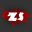
<style>
.page{position:relative;width:32px;height:32px;background:#333333}
.page>*{position:absolute;margin:0}
.t1{font:13.3px "ZombieA";letter-spacing:0.025em;color:#ffffff;font-weight:bold}
</style>
<div class="page">
<p class="t1" style="left:7px;top:12px;width:17px;height:9px">ZS</p>
</div>
